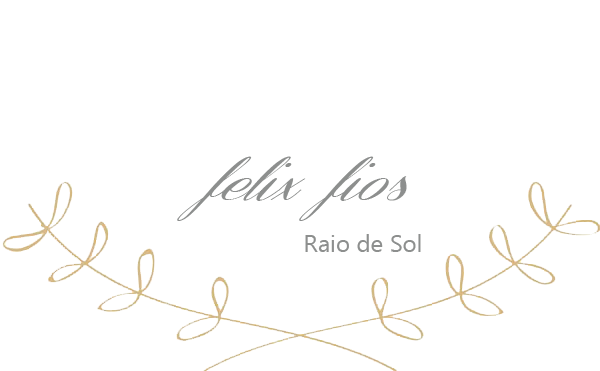
<style>
.page{position:relative;width:600px;height:371px;background:#ffffff}
.page>*{position:absolute;margin:0}
.t1{font:42px "ConeriaScriptSlantedDemo";color:#8d8f8e}
.t2{font:24px "SegoeUISymbol";color:#8d8f8e}
</style>
<div class="page">
<p class="t1" style="left:177px;top:156px;width:230px;height:65px">felix fios</p>
<p class="t2" style="left:305px;top:234px;width:116px;height:18px">Raio de Sol</p>
</div>
